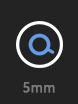
<style>
.page{position:relative;width:78px;height:104px;background:#232323}
.page>*{position:absolute;margin:0}
.t1{font:14px "SegoeUI";color:#7c7c7c;font-weight:bold}
</style>
<div class="page">
<p class="t1" style="left:23px;top:82px;width:32px;height:11px">5mm</p>
</div>
